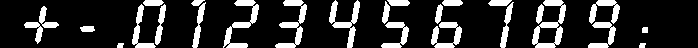
<style>
.page{position:relative;width:698px;height:48px;background:#000000}
.page>*{position:absolute;margin:0}
.t1{font:73px "LcdD";color:#ffffff}
</style>
<div class="page">
<p class="t1" style="left:24px;top:0px;width:624px;height:49px">+ - .0 1 2 3 4 5 6 7 8 9 :</p>
</div>
